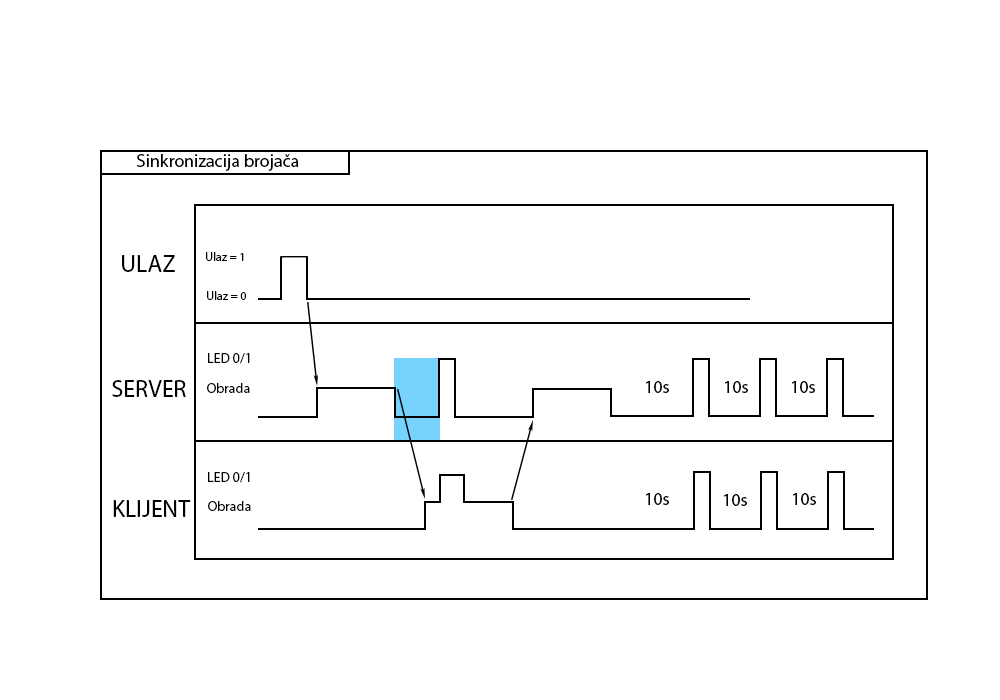
<style>
.page{position:relative;width:1000px;height:700px;background:#ffffff}
.page>*{position:absolute;margin:0}
.t1{font:18px "MyriadPro-Regular";color:#000000}
.t2{font:24px "MyriadPro-Regular";color:#000000}
.t3{font:12px "MyriadPro-Regular";color:#000000}
.t4{font:14px "MyriadPro-Regular";color:#000000}
</style>
<div class="page">
<p class="t1" style="left:137px;top:154px;width:162px;height:17px">Sinkronizacija brojača</p>
<p class="t2" style="left:122px;top:255px;width:53px;height:17px">ULAZ</p>
<p class="t3" style="left:206px;top:252px;width:38px;height:9px">Ulaz = 1</p>
<p class="t3" style="left:207px;top:291px;width:39px;height:9px">Ulaz = 0</p>
<p class="t4" style="left:208px;top:353px;width:42px;height:11px">LED 0/1</p>
<p class="t2" style="left:112px;top:380px;width:74px;height:17px">SERVER</p>
<p class="t4" style="left:207px;top:383px;width:43px;height:10px">Obrada</p>
<p class="t1" style="left:646px;top:381px;width:23px;height:12px">10s</p>
<p class="t1" style="left:725px;top:381px;width:23px;height:12px">10s</p>
<p class="t1" style="left:792px;top:381px;width:23px;height:12px">10s</p>
<p class="t4" style="left:208px;top:472px;width:42px;height:11px">LED 0/1</p>
<p class="t1" style="left:646px;top:493px;width:23px;height:12px">10s</p>
<p class="t1" style="left:724px;top:494px;width:23px;height:12px">10s</p>
<p class="t1" style="left:793px;top:493px;width:23px;height:12px">10s</p>
<p class="t2" style="left:113px;top:500px;width:78px;height:17px">KLIJENT</p>
<p class="t4" style="left:208px;top:501px;width:43px;height:10px">Obrada</p>
</div>
